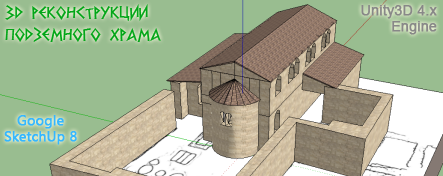
<style>
.page{position:relative;width:443px;height:176px;background:#99bd90}
.page>*{position:absolute;margin:0}
.t1{font:18px "DSGreece";color:#03a619}
.t2{font:14px "ArialMT";color:#888888;font-weight:bold}
.t3{font:14px "SegoeUI";color:#35b7ff;font-weight:bold}
</style>
<div class="page">
<p class="t1" style="left:5px;top:4px;width:156px;height:38px">3D реконструкции <br>подземного храма</p>
<p class="t2" style="left:361px;top:4px;width:76px;height:31px;text-align:right">Unity3D 4.x<br>Engine</p>
<p class="t3" style="left:4px;top:115px;width:73px;height:30px;text-align:center">Google<br>SketchUp 8</p>
</div>
